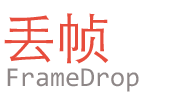
<style>
.page{position:relative;width:181px;height:100px;background:#ffffff}
.page>*{position:absolute;margin:0}
.t1{font:54.5px "STXihei";color:#e74c3c}
.t2{font:27.3px "Consolas";color:#8e8787}
</style>
<div class="page">
<p class="t1" style="left:4px;top:13px;width:105px;height:51px">丢帧</p>
<p class="t2" style="left:7px;top:68px;width:132px;height:24px">FrameDrop</p>
</div>
